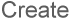
<style>
.page{position:relative;width:69px;height:24px;background:#ffffff}
.page>*{position:absolute;margin:0}
.t1{font:22.7px "ArialMT";color:#5c5c5c}
</style>
<div class="page">
<p class="t1" style="left:2px;top:1px;width:67px;height:17px">Create</p>
</div>
